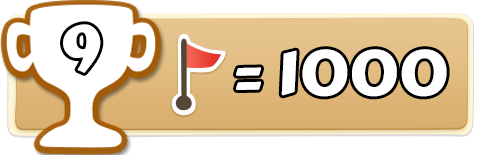
<style>
.page{position:relative;width:477px;height:155px;background:#ffffff}
.page>*{position:absolute;margin:0}
.t1{font:62.2px "CarterOne";color:#ffffff}
</style>
<div class="page">
<p class="t1" style="left:63px;top:24px;width:38px;height:49px">9</p>
<p class="t1" style="left:236px;top:49px;width:211px;height:48px">= 1000</p>
</div>
